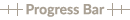
<style>
.page{position:relative;width:130px;height:20px;background:#ffffff}
.page>*{position:absolute;margin:0}
.t1{font:14px "Lato-Bold";color:#a9a093}
</style>
<div class="page">
<p class="t1" style="left:26px;top:4px;width:79px;height:13px">Progress Bar</p>
</div>
